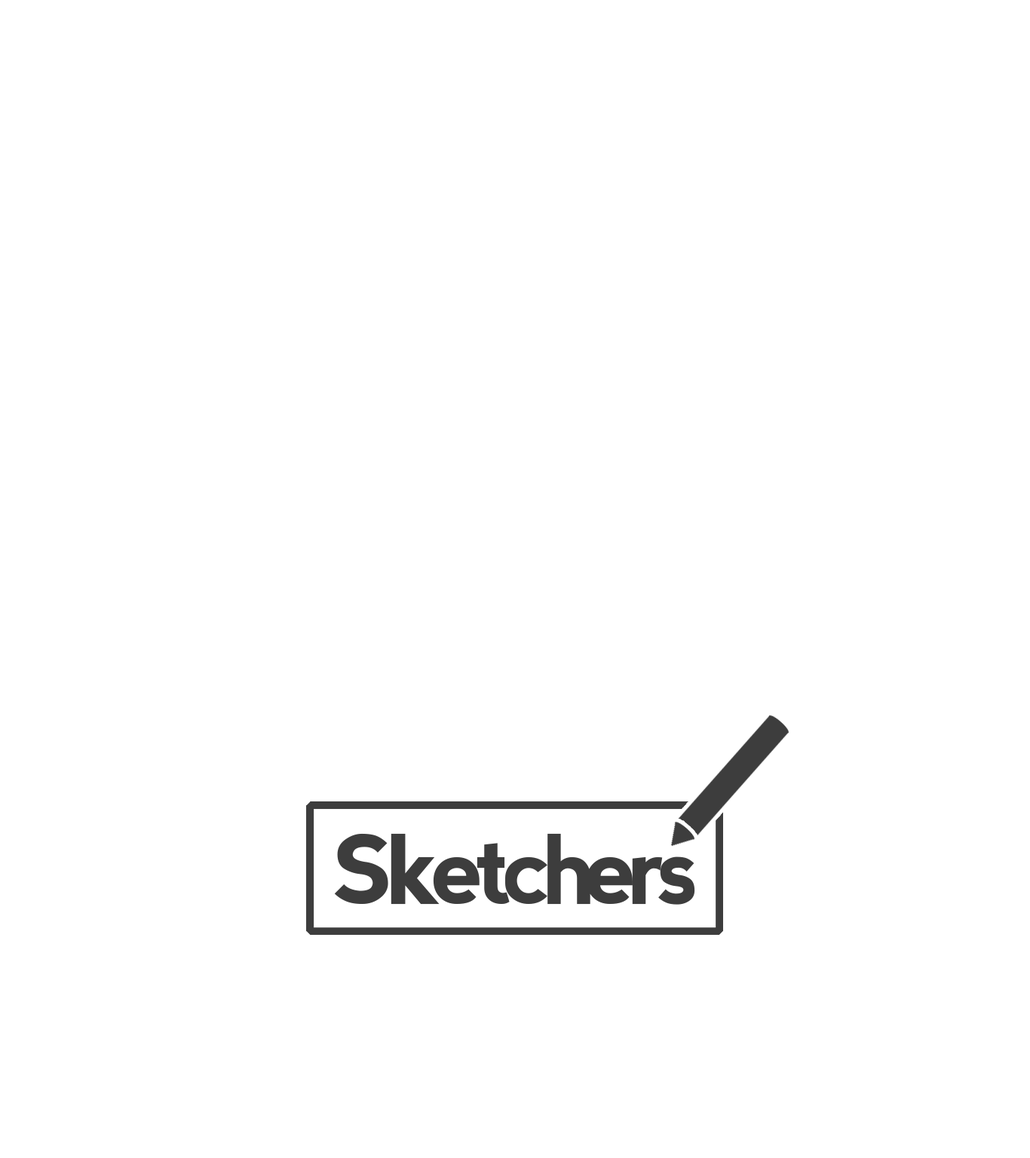
<style>
.page{position:relative;width:1030px;height:1158px;background:#ffffff}
.page>*{position:absolute;margin:0}
.t1{font:95.9px "nevis-Bold";letter-spacing:-0.1em;color:#3d3d3d}
</style>
<div class="page">
<p class="t1" style="left:334px;top:833px;width:361px;height:72px">Sketchers</p>
</div>
